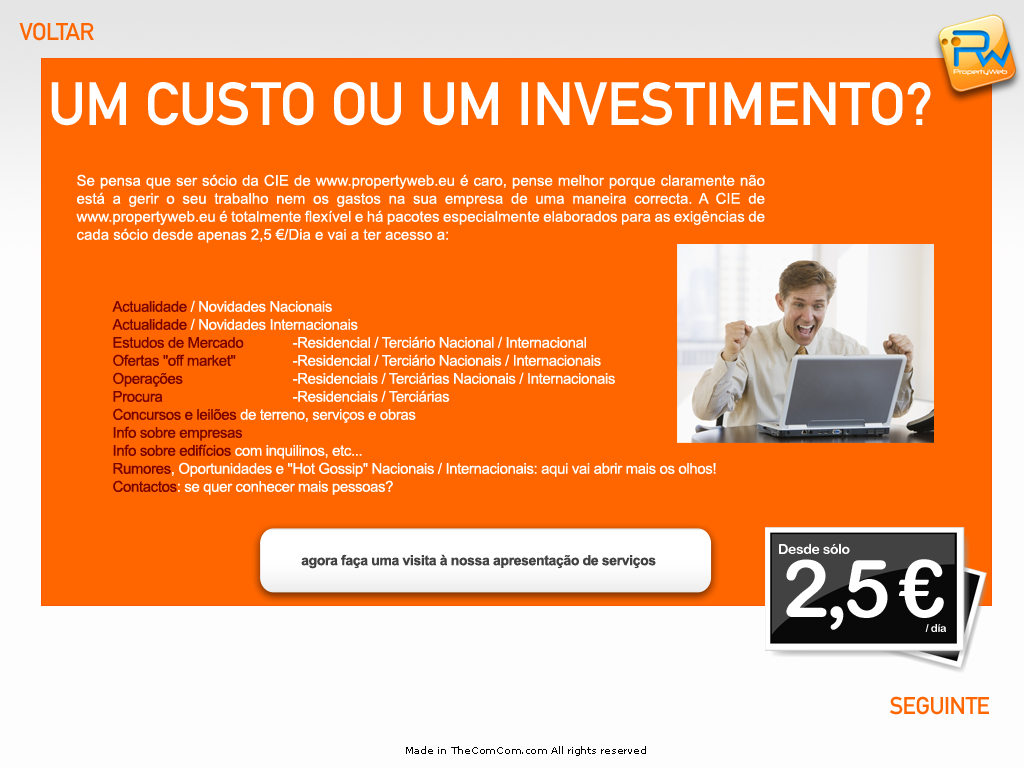
<style>
.page{position:relative;width:1024px;height:768px;background:#ff6600}
.page>*{position:absolute;margin:0}
.t1{font:24px "DINMittelschriftStd";letter-spacing:-0.025em;color:#ff6600}
.t2{font:60px "DINMittelschriftStd";color:#ffffff}
.t3{font:15px "ArialMT";color:#ffffff}
.t4{font:15px "ArialMT";letter-spacing:-0.025em;color:#770000}
.t5{font:15px "ArialMT";letter-spacing:-0.025em;color:#ffffff}
.t6{font:14px "ArialRoundedMTBold";letter-spacing:-0.025em;color:#ffffff}
.t7{font:14px "Arial-BoldMT";letter-spacing:-0.025em;color:#424242}
.t8{font:80px "ArialRoundedMTBold";letter-spacing:-0.075em;color:#ffffff}
.t9{font:11px "ArialRoundedMTBold";letter-spacing:-0.025em;color:#ffffff}
.t10{font:10px "MSReferenceSansSerif";letter-spacing:-0.025em;color:#010101}
</style>
<div class="page">
<p class="t1" style="left:19px;top:22px;width:75px;height:19px">VOLTAR</p>
<p class="t2" style="left:51px;top:82px;width:880px;height:44px">UM CUSTO OU UM INVESTIMENTO?</p>
<p class="t3" style="left:76px;top:174px;width:689px;height:321px;text-align:justify">Se pensa que ser sócio da CIE de www.propertyweb.eu é caro, pense melhor porque claramente não está a gerir o seu trabalho nem os gastos na sua empresa de uma maneira correcta. A CIE de www.propertyweb.eu é totalmente flexível e há pacotes especialmente elaborados para as exigências de cada sócio desde apenas 2,5 €/Dia e vai a ter acesso a: <br><br> <br><br> <span class="t4">Actualidade</span><span class="t5"> / Novidades Nacionais   <br> </span><span class="t4">Actualidade</span><span class="t5"> / Novidades Internacionais   <br> </span><span class="t4">Estudos de Mercado </span><span class="t5">  -Residencial / Terciário Nacional / Internacional  <br> </span><span class="t4">Ofertas "off market"  </span><span class="t5">   -Residencial / Terciário Nacionais / Internacionais  <br> </span><span class="t4">Operações </span><span class="t5">         -Residenciais / Terciárias Nacionais / Internacionais   <br> </span><span class="t4">Procura </span><span class="t5">          -Residenciais / Terciárias  <br> </span><span class="t4">Concursos e leilões</span><span class="t5"> de terreno, serviços e obras  <br> </span><span class="t4">Info sobre empresas   <br> Info sobre edifícios</span><span class="t5"> com inquilinos, etc...  <br> </span><span class="t4">Rumores</span><span class="t5">, Oportunidades e "Hot Gossip" Nacionais / Internacionais: aqui vai abrir mais os olhos!    </span><span class="t4">Contactos</span><span class="t5">: se quer conhecer mais pessoas?</span></p>
<p class="t6" style="left:779px;top:543px;width:71px;height:11px">Desde sólo</p>
<p class="t7" style="left:301px;top:554px;width:355px;height:15px">agora faça uma visita à nossa apresentação de serviços</p>
<p class="t8" style="left:786px;top:559px;width:158px;height:71px">2,5 €</p>
<p class="t9" style="left:925px;top:624px;width:21px;height:8px">/ día</p>
<p class="t1" style="left:889px;top:696px;width:100px;height:19px">SEGUINTE</p>
<p class="t10" style="left:406px;top:746px;width:240px;height:10px">Made in TheComCom.com All rights reserved</p>
</div>
